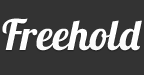
<style>
.page{position:relative;width:144px;height:75px;background:#333333}
.page>*{position:absolute;margin:0}
.t1{font:42px "Lobster";color:#ffffff}
</style>
<div class="page">
<p class="t1" style="left:2px;top:18px;width:140px;height:33px">Freehold</p>
</div>
